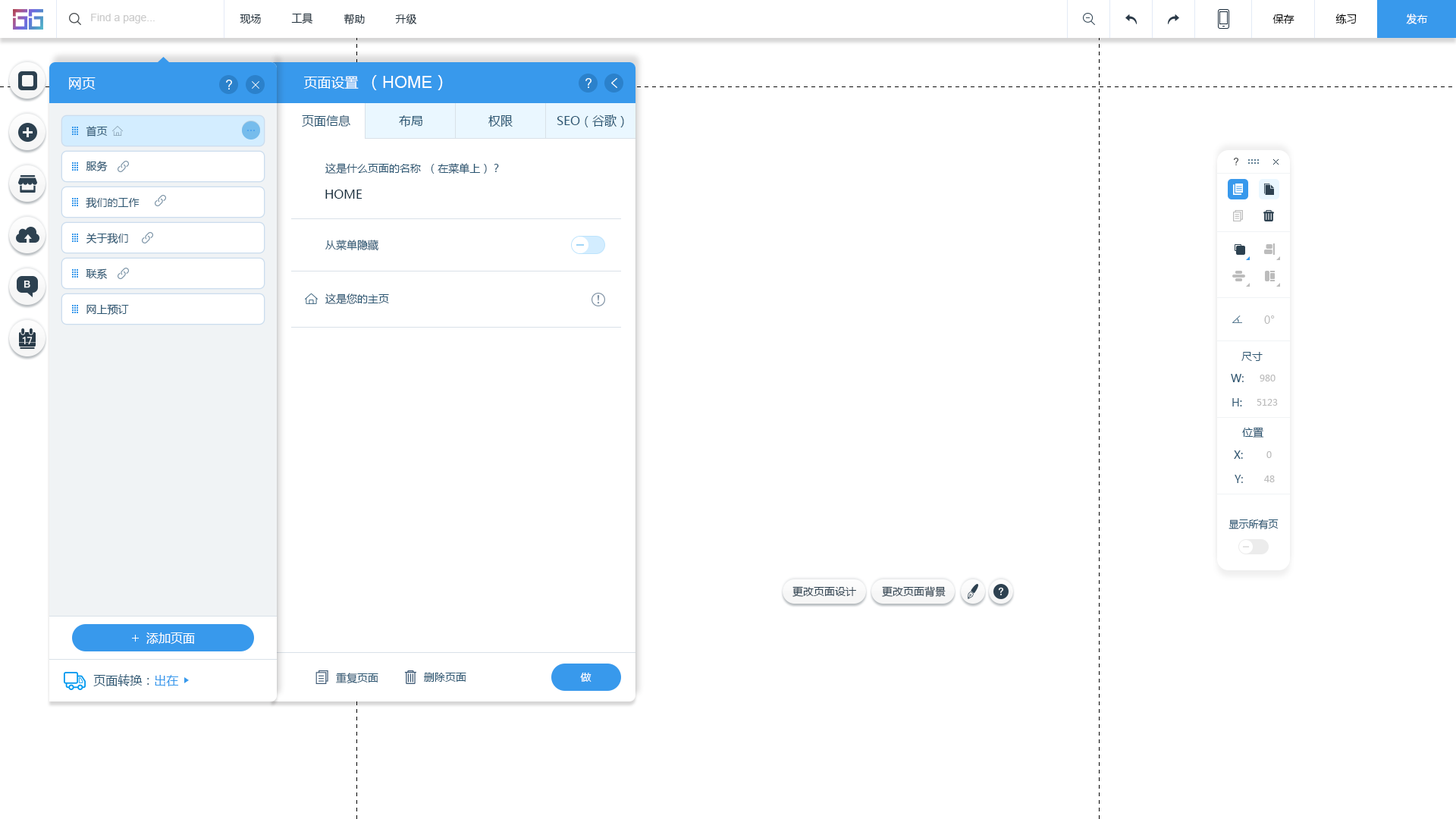
<style>
.page{position:relative;width:1456px;height:819px;background:#ffffff}
.page>*{position:absolute;margin:0}
.t1{font:10.6px "ArialMT";color:#cccccc}
.t2{font:10.6px "MicrosoftYaHei";color:#20303c}
.t3{font:10.6px "MicrosoftYaHei";color:#000000}
.t4{font:10.6px "MicrosoftYaHei";color:#ffffff}
.t5{font:13.6px "MicrosoftYaHei";color:#ffffff}
.t6{font:16.7px "ArialMT";color:#ffffff}
.t7{font:16.7px "MicrosoftYaHei";color:#ffffff}
.t8{font:10.6px "MicrosoftYaHei";color:#2b5672}
.t9{font:12.1px "MicrosoftYaHei";color:#2b5672}
.t10{font:12.1px "MicrosoftYaHei";color:#162d3d}
.t11{font:10.6px "MicrosoftYaHei";color:#bcbcbc}
.t12{font:9.1px "MicrosoftYaHei";color:#bcbcbc}
.t13{font:9.9px "MicrosoftYaHei";color:#2b5672}
.t14{font:10.6px "MicrosoftYaHei";color:#2d4150}
.t15{font:12.1px "MicrosoftYaHei";color:#ffffff}
.t16{font:9.1px "MicrosoftYaHei";color:#2b5672}
.t17{font:9.1px "MicrosoftYaHei";color:#3899ec}
</style>
<div class="page">
<p class="t1" style="left:91px;top:14px;width:64px;height:10px">Find a page...</p>
<p class="t2" style="left:240px;top:14px;width:21px;height:10px">现场</p>
<p class="t2" style="left:291px;top:13px;width:22px;height:11px">工具</p>
<p class="t2" style="left:344px;top:14px;width:21px;height:11px">帮助</p>
<p class="t2" style="left:395px;top:14px;width:22px;height:10px">升级</p>
<p class="t3" style="left:1272px;top:14px;width:22px;height:10px">保存</p>
<p class="t3" style="left:1335px;top:14px;width:22px;height:10px">练习</p>
<p class="t4" style="left:1406px;top:14px;width:22px;height:10px">发布</p>
<p class="t5" style="left:69px;top:77px;width:27px;height:12px">网页</p>
<p class="t5" style="left:303px;top:76px;width:56px;height:13px">页面设置</p>
<p class="t6" style="left:372px;top:75px;width:71px;height:15px"><span class="t7">（</span>HOME<span class="t7">）</span></p>
<p class="t8" style="left:86px;top:126px;width:22px;height:10px">首页</p>
<p class="t9" style="left:302px;top:115px;width:48px;height:12px">页面信息</p>
<p class="t9" style="left:399px;top:115px;width:23px;height:12px">布局</p>
<p class="t9" style="left:488px;top:115px;width:25px;height:12px">权限</p>
<p class="t9" style="left:557px;top:115px;width:67px;height:12px">SEO（谷歌）</p>
<p class="t8" style="left:86px;top:161px;width:22px;height:10px">服务</p>
<p class="t8" style="left:325px;top:163px;width:174px;height:11px">这是什么页面的名称  （在菜单上）？</p>
<p class="t8" style="left:86px;top:197px;width:54px;height:12px">我们的工作</p>
<p class="t10" style="left:325px;top:190px;width:37px;height:9px">HOME</p>
<p class="t8" style="left:86px;top:233px;width:42px;height:11px">关于我们</p>
<p class="t8" style="left:325px;top:240px;width:53px;height:11px">从菜单隐藏</p>
<p class="t8" style="left:86px;top:268px;width:21px;height:11px">联系</p>
<p class="t8" style="left:325px;top:293px;width:64px;height:11px">这是您的主页</p>
<p class="t8" style="left:86px;top:304px;width:43px;height:11px">网上预订</p>
<p class="t11" style="left:1264px;top:315px;width:11px;height:9px">0°</p>
<p class="t8" style="left:1241px;top:352px;width:22px;height:9px">尺寸</p>
<p class="t8" style="left:1231px;top:374px;width:13px;height:8px">W:</p>
<p class="t12" style="left:1260px;top:375px;width:15px;height:6px">980</p>
<p class="t8" style="left:1232px;top:398px;width:10px;height:8px">H:</p>
<p class="t12" style="left:1257px;top:399px;width:21px;height:7px">5123</p>
<p class="t8" style="left:1242px;top:427px;width:22px;height:11px">位置</p>
<p class="t8" style="left:1234px;top:450px;width:9px;height:9px">X:</p>
<p class="t12" style="left:1266px;top:451px;width:6px;height:7px">0</p>
<p class="t8" style="left:1235px;top:475px;width:8px;height:8px">Y:</p>
<p class="t12" style="left:1264px;top:475px;width:11px;height:7px">48</p>
<p class="t13" style="left:1228px;top:519px;width:51px;height:10px">显示所有页</p>
<p class="t14" style="left:792px;top:586px;width:64px;height:11px">更改页面设计</p>
<p class="t14" style="left:882px;top:586px;width:64px;height:11px">更改页面背景</p>
<p class="t15" style="left:146px;top:632px;width:49px;height:12px">添加页面</p>
<p class="t16" style="left:93px;top:674px;width:86px;height:12px">页面转换：<span class="t17">出在</span></p>
<p class="t8" style="left:336px;top:673px;width:42px;height:11px">重复页面</p>
<p class="t8" style="left:424px;top:673px;width:42px;height:9px">删除页面</p>
<p class="t4" style="left:580px;top:673px;width:11px;height:9px">做</p>
</div>
